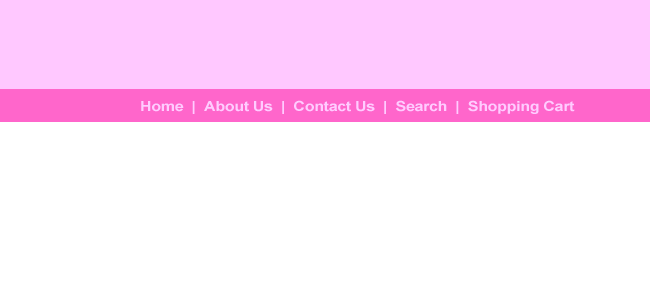
<style>
.page{position:relative;width:650px;height:300px;background:#ffffff}
.page>*{position:absolute;margin:0}
.t1{font:14px "Arial-BoldMT";letter-spacing:-0.025em;color:#ffccff;scale:1.15 1}
</style>
<div class="page">
<p class="t1" style="left:141px;top:100px;width:434px;height:14px">Home  |  About Us  |  Contact Us  |  Search  |  Shopping Cart</p>
</div>
